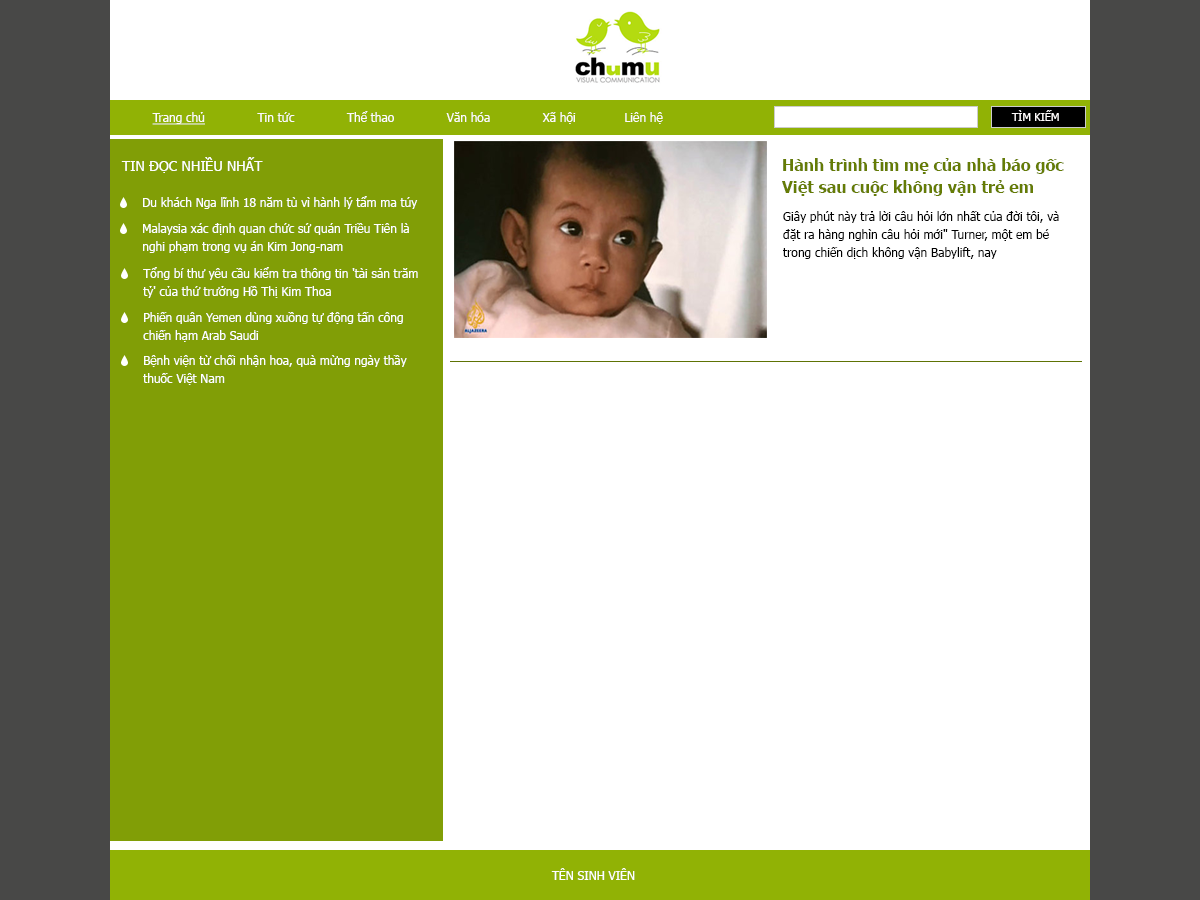
<style>
.page{position:relative;width:1200px;height:900px;background:#ffffff}
.page>*{position:absolute;margin:0}
.t1{font:12px "Tahoma";color:#fefbfb}
.t2{font:12px "Tahoma";color:#fefbfb;text-decoration:underline}
.t3{font:11px "Tahoma";color:#fefbfb}
.t4{font:14px "Tahoma";color:#ffffff}
.t5{font:16px/22px "Tahoma-Bold";color:#657c05}
.t6{font:12px "Tahoma";color:#ffffff}
.t7{font:12px/18px "Tahoma";color:#000000}
.t8{font:12px/18px "Tahoma";color:#ffffff}
</style>
<div class="page">
<p class="t1" style="left:152px;top:111px;width:511px;height:14px"><span class="t2">Trang chủ</span>              Tin tức              Thể thao              Văn hóa              Xã hội             Liên hệ</p>
<p class="t3" style="left:1011px;top:110px;width:48px;height:11px">TÌM KIẾM</p>
<p class="t4" style="left:121px;top:157px;width:142px;height:16px">TIN ĐỌC NHIỀU NHẤT</p>
<p class="t5" style="left:782px;top:158px;width:282px;height:38px">Hành trình tìm mẹ của nhà báo gốc <br>Việt sau cuộc không vận trẻ em</p>
<p class="t6" style="left:143px;top:196px;width:275px;height:13px">Du khách Nga lĩnh 18 năm tù vì hành lý tẩm ma túy</p>
<p class="t7" style="left:783px;top:211px;width:276px;height:48px">Giây phút này trả lời câu hỏi lớn nhất của đời tôi, và <br>đặt ra hàng nghìn câu hỏi mới" Turner, một em bé <br>trong chiến dịch không vận Babylift, nay</p>
<p class="t8" style="left:143px;top:223px;width:266px;height:30px">Malaysia xác định quan chức sứ quán Triều Tiên là <br>nghi phạm trong vụ án Kim Jong-nam</p>
<p class="t8" style="left:143px;top:267px;width:275px;height:31px">Tổng bí thư yêu cầu kiểm tra thông tin 'tài sản trăm <br>tỷ' của thứ trưởng Hồ Thị Kim Thoa</p>
<p class="t8" style="left:143px;top:312px;width:260px;height:30px">Phiến quân Yemen dùng xuồng tự động tấn công <br>chiến hạm Arab Saudi</p>
<p class="t8" style="left:143px;top:355px;width:264px;height:30px">Bệnh viện từ chối nhận hoa, quà mừng ngày thầy <br>thuốc Việt Nam</p>
<p class="t6" style="left:551px;top:868px;width:84px;height:12px">TÊN SINH VIÊN</p>
</div>
